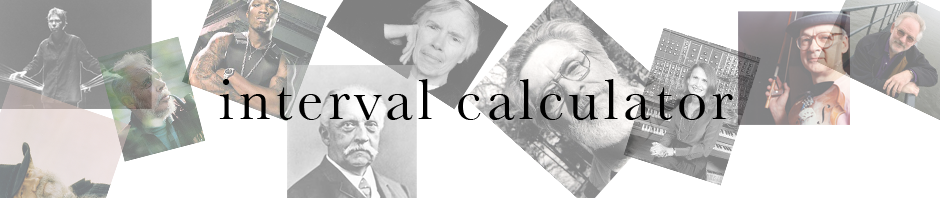
<style>
.page{position:relative;width:940px;height:198px;background:#ffffff}
.page>*{position:absolute;margin:0}
.t1{font:60px "Baskerville";letter-spacing:0.075em;color:#000000}
</style>
<div class="page">
<p class="t1" style="left:219px;top:79px;width:514px;height:41px">interval calculator</p>
</div>
